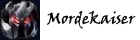
<style>
.page{position:relative;width:140px;height:40px;background:#ffffff}
.page>*{position:absolute;margin:0}
.t1{font:12px "VinerHandITC";color:#000000}
</style>
<div class="page">
<p class="t1" style="left:47px;top:10px;width:89px;height:19px">Mordekaiser</p>
</div>
